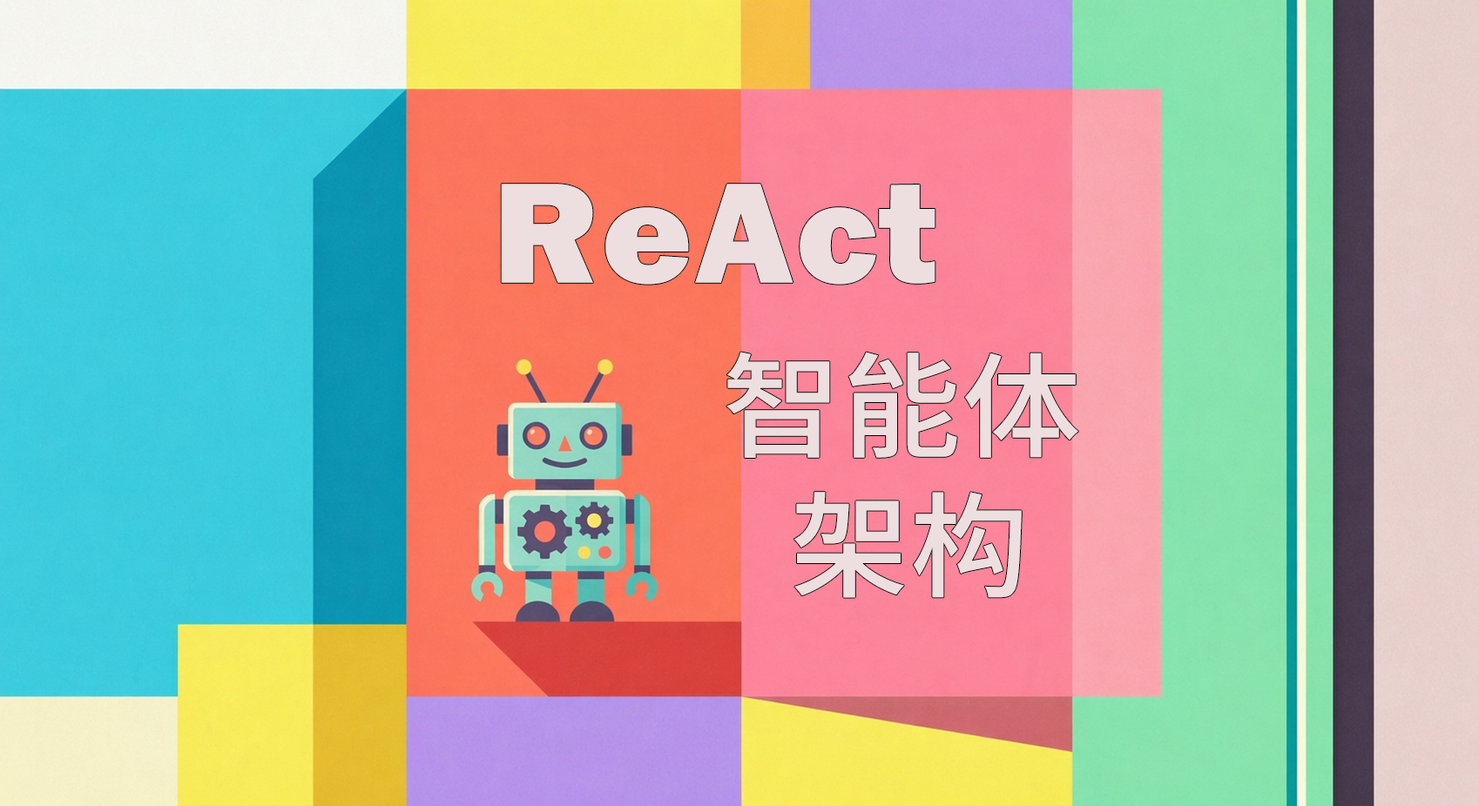
<style>
.page{position:relative;width:1479px;height:806px}
.page>*{position:absolute;margin:0}
.t1{font:148px "FranklinGothic-Heavy";letter-spacing:0.019em;color:#eddfdf;scale:1.04 1}
.t2{font:113.2px "NotoSansSC-Medium";letter-spacing:0.019em;color:#eddfdf;scale:1.04 1}
</style>
<div class="page">
<p class="t1" style="left:501px;top:184px;width:434px;height:101px">ReAct</p>
<p class="t2" style="left:726px;top:352px;width:352px;height:106px">智能体</p>
<p class="t2" style="left:793px;top:492px;width:229px;height:106px">架构</p>
</div>
